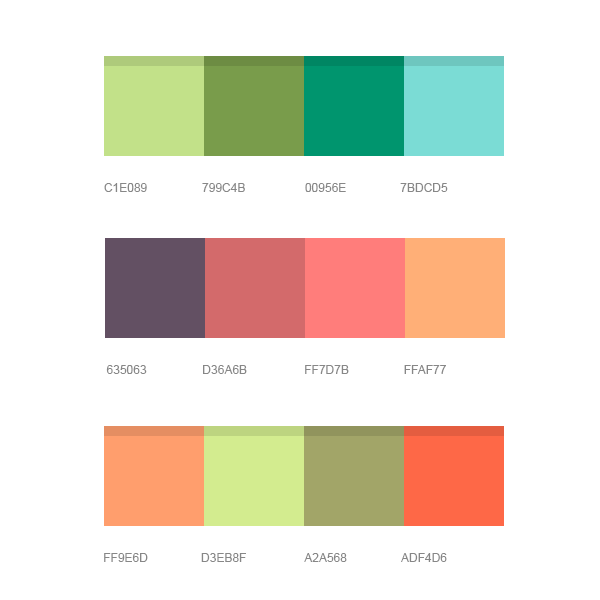
<style>
.page{position:relative;width:600px;height:600px;background:#ffffff}
.page>*{position:absolute;margin:0}
.t1{font:12px "ArialMT";color:#878787;text-transform:uppercase}
</style>
<div class="page">
<p class="t1" style="left:104px;top:183px;width:43px;height:9px">c1e089</p>
<p class="t1" style="left:202px;top:183px;width:43px;height:9px">799c4b</p>
<p class="t1" style="left:305px;top:183px;width:41px;height:9px">00956e</p>
<p class="t1" style="left:400px;top:183px;width:48px;height:9px">7bdcd5</p>
<p class="t1" style="left:106px;top:365px;width:41px;height:9px">635063</p>
<p class="t1" style="left:203px;top:365px;width:44px;height:9px">d36a6b</p>
<p class="t1" style="left:305px;top:365px;width:44px;height:9px">ff7d7b</p>
<p class="t1" style="left:404px;top:365px;width:42px;height:9px">ffaf77</p>
<p class="t1" style="left:104px;top:553px;width:44px;height:9px">ff9e6d</p>
<p class="t1" style="left:201px;top:553px;width:45px;height:9px">d3eb8f</p>
<p class="t1" style="left:304px;top:553px;width:43px;height:9px">a2a568</p>
<p class="t1" style="left:401px;top:553px;width:46px;height:9px">adf4d6</p>
</div>
